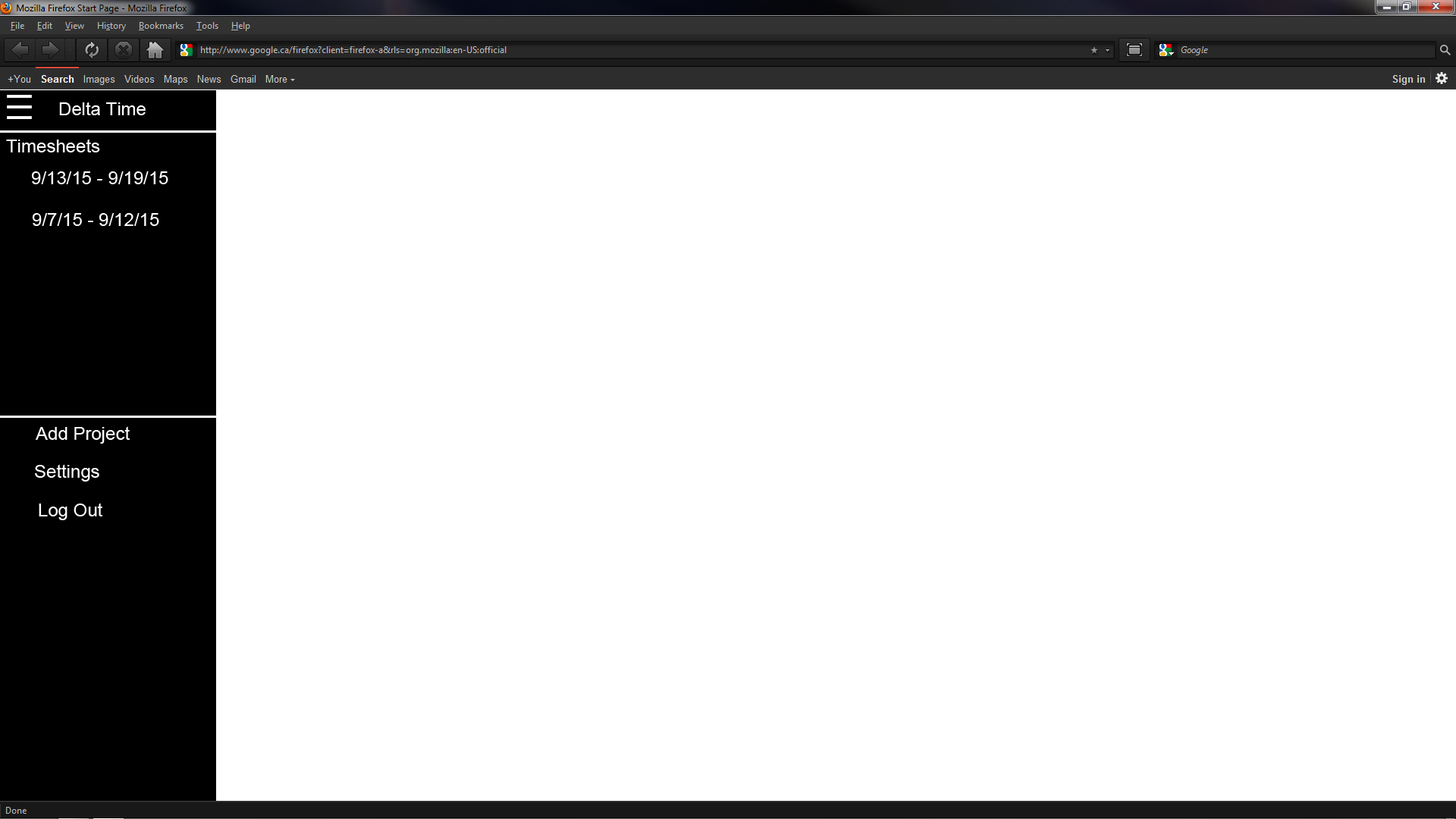
<style>
.page{position:relative;width:1456px;height:819px;background:#ffffff}
.page>*{position:absolute;margin:0}
.t1{font:18.2px "ArialMT";color:#ffffff}
</style>
<div class="page">
<p class="t1" style="left:59px;top:102px;width:87px;height:13px">Delta Time</p>
<p class="t1" style="left:6px;top:139px;width:94px;height:13px">Timesheets</p>
<p class="t1" style="left:31px;top:171px;width:137px;height:13px">9/13/15 - 9/19/15</p>
<p class="t1" style="left:32px;top:213px;width:127px;height:13px">9/7/15 - 9/12/15</p>
<p class="t1" style="left:36px;top:426px;width:94px;height:18px">Add Project</p>
<p class="t1" style="left:35px;top:464px;width:64px;height:18px">Settings</p>
<p class="t1" style="left:39px;top:503px;width:63px;height:17px">Log Out</p>
</div>
